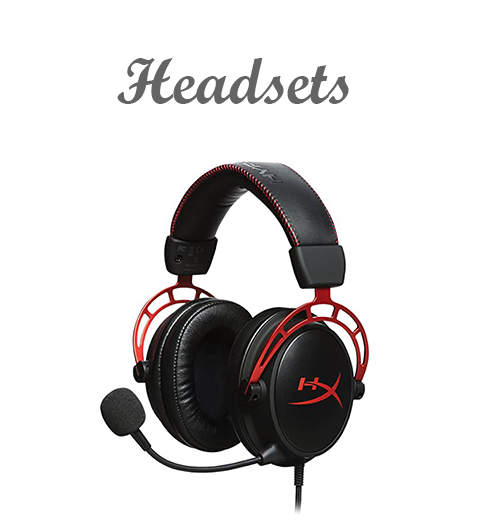
<style>
.page{position:relative;width:499px;height:526px;background:#ffffff}
.page>*{position:absolute;margin:0}
.t1{font:64px "ScriptMTBold";color:#656464}
</style>
<div class="page">
<p class="t1" style="left:117px;top:58px;width:232px;height:46px">Headsets</p>
</div>
